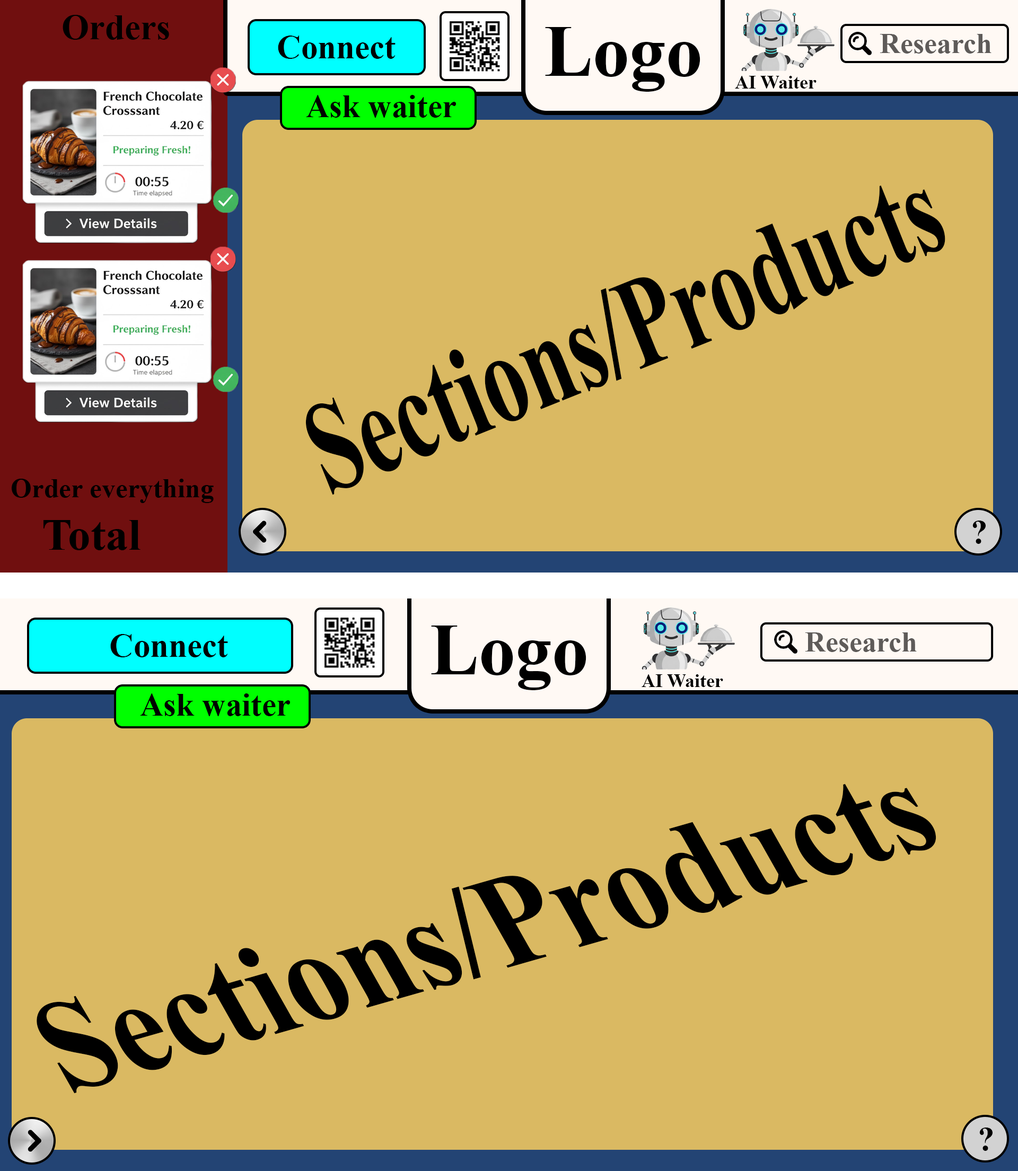
<style>
.page{position:relative;width:1018px;height:1171px;background:#dab962}
.page>*{position:absolute;margin:0}
.t1{font:35.7px "TimesNewRomanPS-BoldMT";color:#000000}
.t2{font:73.3px "TimesNewRomanPS-BoldMT";color:#000000}
.t3{font:33.4px "TimesNewRomanPS-BoldMT";color:#000000}
.t4{font:28.6px "TimesNewRomanPS-BoldMT";color:#5e5b59}
.t5{font:19px "TimesNewRomanPS-BoldMT";color:#000000}
.t6{font:32.5px "TimesNewRomanPS-BoldMT";color:#000000}
.t7{font:129.9px "TimesNewRomanPS-BoldMT";color:#000000;scale:0.68 1}
.t8{font:27.3px "TimesNewRomanPS-BoldMT";color:#000000}
.t9{font:45.2px "TimesNewRomanPS-BoldMT";color:#000000}
.t10{font:138.5px "TimesNewRomanPS-BoldMT";color:#000000;scale:0.87 1}
</style>
<div class="page">
<p class="t1" style="left:63px;top:15px;width:106px;height:25px">Orders</p>
<p class="t2" style="left:545px;top:27px;width:155px;height:65px">Logo</p>
<p class="t3" style="left:278px;top:36px;width:118px;height:23px">Connect</p>
<p class="t4" style="left:880px;top:34px;width:112px;height:20px">Research</p>
<p class="t5" style="left:735px;top:76px;width:82px;height:13px">AI Waiter</p>
<p class="t6" style="left:306px;top:95px;width:150px;height:23px">Ask waiter</p>
<p class="t7" style="left:305px;top:185px;width:640px;height:310px;rotate:-22deg">Sections/Products</p>
<p class="t8" style="left:12px;top:479px;width:202px;height:24px">Order everything</p>
<p class="t9" style="left:43px;top:520px;width:98px;height:30px">Total</p>
<p class="t3" style="left:972px;top:521px;width:14px;height:23px">?</p>
<p class="t2" style="left:431px;top:626px;width:155px;height:64px">Logo</p>
<p class="t3" style="left:110px;top:634px;width:118px;height:23px">Connect</p>
<p class="t4" style="left:805px;top:633px;width:112px;height:19px">Research</p>
<p class="t5" style="left:642px;top:674px;width:81px;height:13px">AI Waiter</p>
<p class="t6" style="left:140px;top:694px;width:150px;height:22px">Ask waiter</p>
<p class="t10" style="left:37px;top:784px;width:899px;height:310px;rotate:-16deg">Sections/Products</p>
<p class="t3" style="left:979px;top:1128px;width:14px;height:23px">?</p>
</div>
